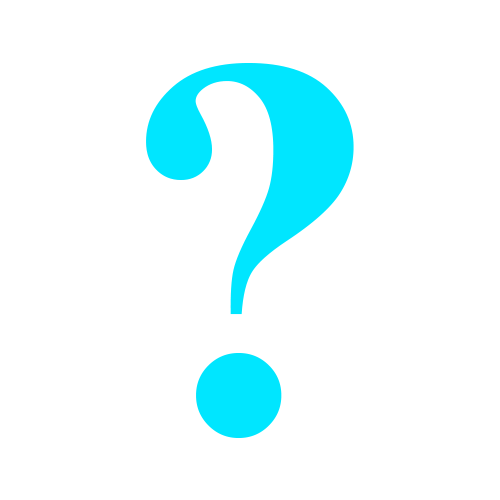
<style>
.page{position:relative;width:500px;height:500px;background:#ffffff}
.page>*{position:absolute;margin:0}
.t1{font:541.7px "TimesNewRomanPS-BoldMT";color:#00e6ff}
</style>
<div class="page">
<p class="t1" style="left:146px;top:63px;width:208px;height:375px">?</p>
</div>
